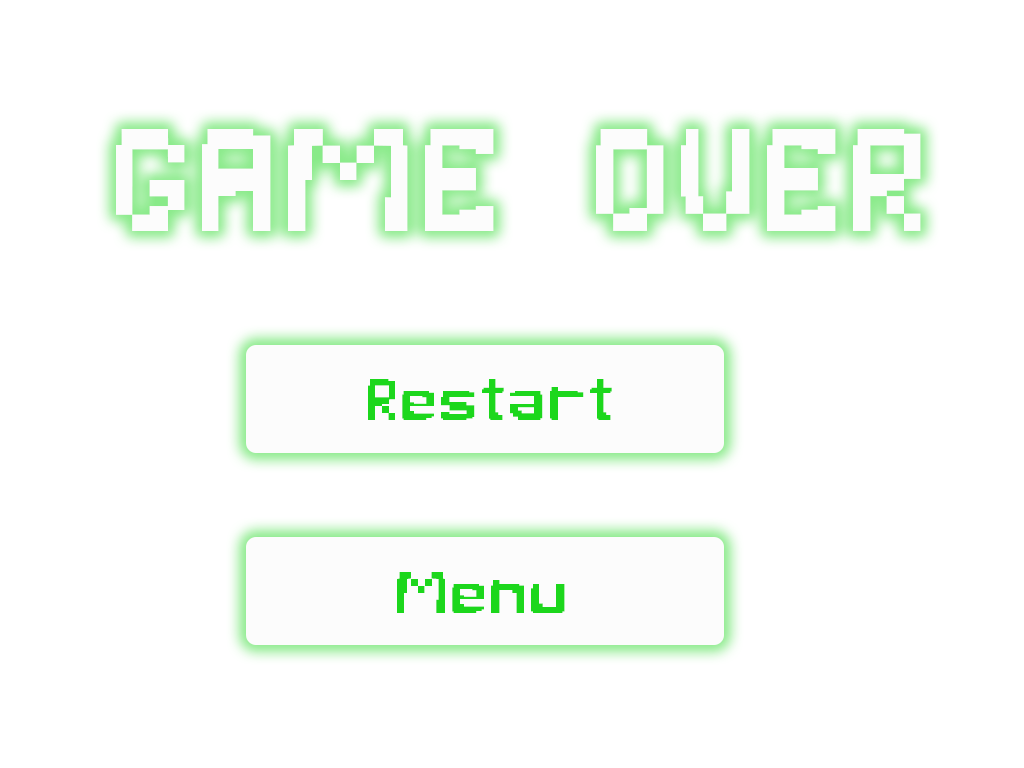
<style>
.page{position:relative;width:1024px;height:768px;background:#ffffff}
.page>*{position:absolute;margin:0}
.t1{font:250px "PixelBug";letter-spacing:0.08em;color:#fcfcfc}
.t2{font:100px "PixelBug";letter-spacing:0.08em;color:#1cd71c}
</style>
<div class="page">
<p class="t1" style="left:116px;top:129px;width:805px;height:102px">GAME OVER</p>
<p class="t2" style="left:368px;top:379px;width:244px;height:41px">Restart</p>
<p class="t2" style="left:397px;top:572px;width:168px;height:41px">Menu</p>
</div>
